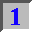
<style>
.page{position:relative;width:32px;height:32px;background:#bbbbbb}
.page>*{position:absolute;margin:0}
.t1{font:25px "TimesNewRomanPS-BoldMT";color:#1200ff}
</style>
<div class="page">
<p class="t1" style="left:11px;top:8px;width:9px;height:17px">1</p>
</div>
